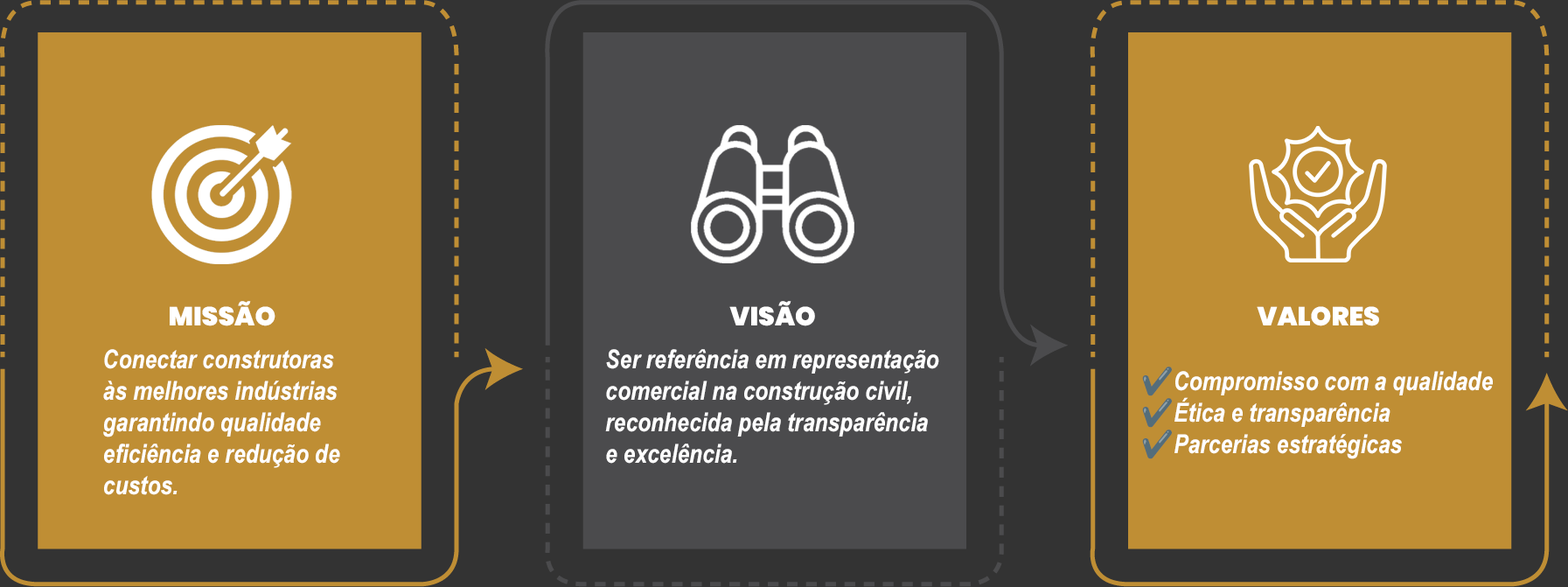
<style>
.page{position:relative;width:1568px;height:587px;background:#bf8e34}
.page>*{position:absolute;margin:0}
.t1{font:26.2px "Poppins-Black";color:#ffffff}
.t2{font:26.2px "ArialNarrow-BoldItalic";color:#ffffff}
.t3{font:26.2px "NotoColorEmoji-SVG";color:#ffffff}
</style>
<div class="page">
<p class="t1" style="left:170px;top:301px;width:105px;height:25px">MISSÃO</p>
<p class="t1" style="left:729px;top:301px;width:86px;height:25px">VISÃO</p>
<p class="t1" style="left:1257px;top:306px;width:122px;height:20px">VALORES</p>
<p class="t2" style="left:103px;top:349px;width:237px;height:146px">Conectar construtoras <br>às melhores indústrias <br>garantindo qualidade<br>eficiência e redução de <br>custos.</p>
<p class="t2" style="left:605px;top:349px;width:334px;height:114px">Ser referência em representação <br>comercial na construção civil, <br>reconhecida pela transparência <br>e excelência.</p>
<p class="t2" style="left:1142px;top:366px;width:351px;height:93px"><span class="t3">✔</span>Compromisso com a qualidade<br><span class="t3">✔</span>Ética e transparência<br><span class="t3">✔</span>Parcerias estratégicas</p>
</div>
